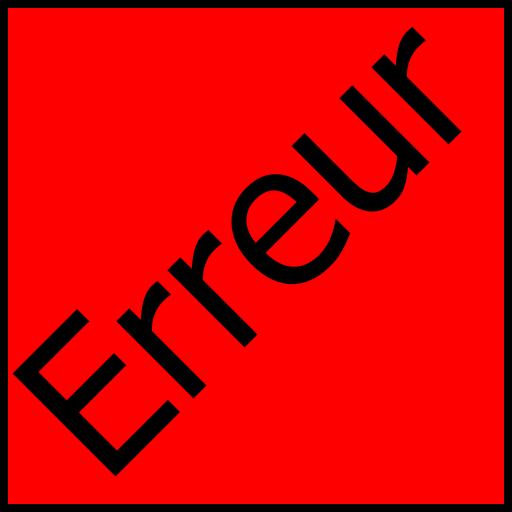
<style>
.page{position:relative;width:512px;height:512px;background:#ff0000}
.page>*{position:absolute;margin:0}
.t1{font:200px "Tahoma";color:#000000}
</style>
<div class="page">
<p class="t1" style="left:12px;top:26px;width:450px;height:451px;rotate:-45deg">Erreur</p>
</div>
